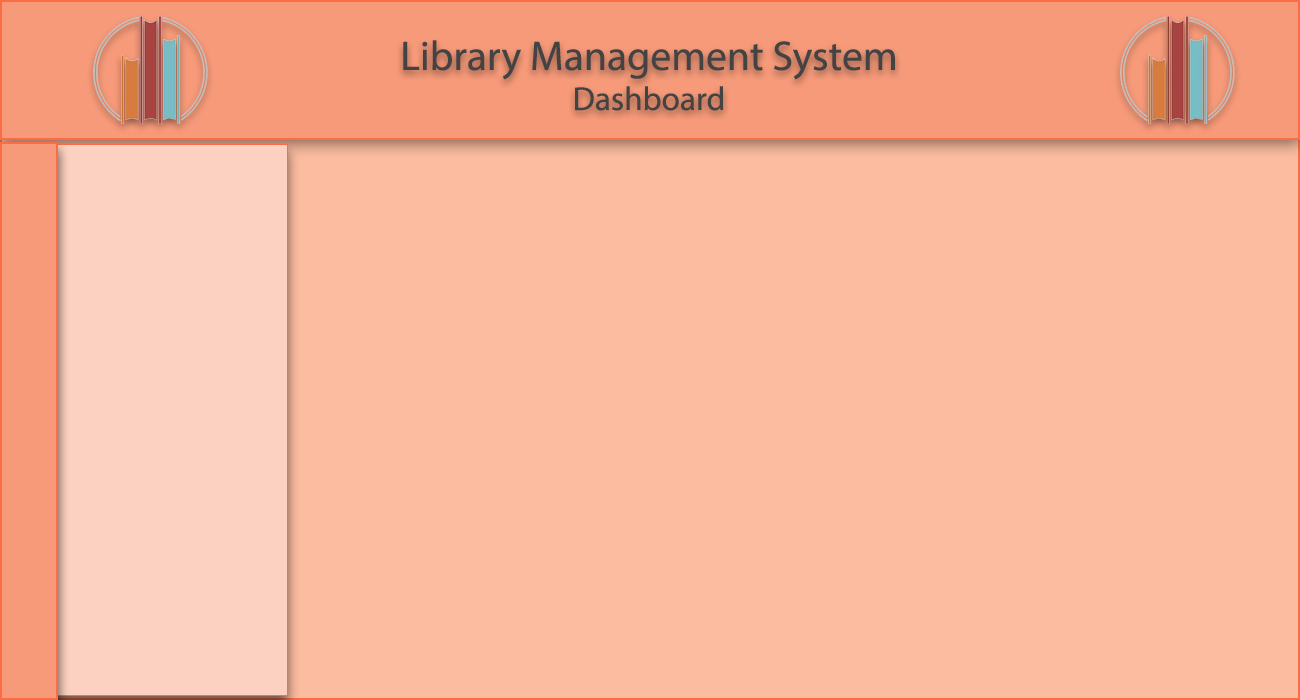
<style>
.page{position:relative;width:1300px;height:700px;background:#fbbca0}
.page>*{position:absolute;margin:0}
.t1{font:41.7px "MyriadPro-Regular";color:#444343}
.t2{font:33.3px "MyriadPro-Regular";color:#444343}
</style>
<div class="page">
<p class="t1" style="left:403px;top:40px;width:492px;height:71px;text-align:center">Library Management System<br><span class="t2">Dashboard</span></p>
</div>
